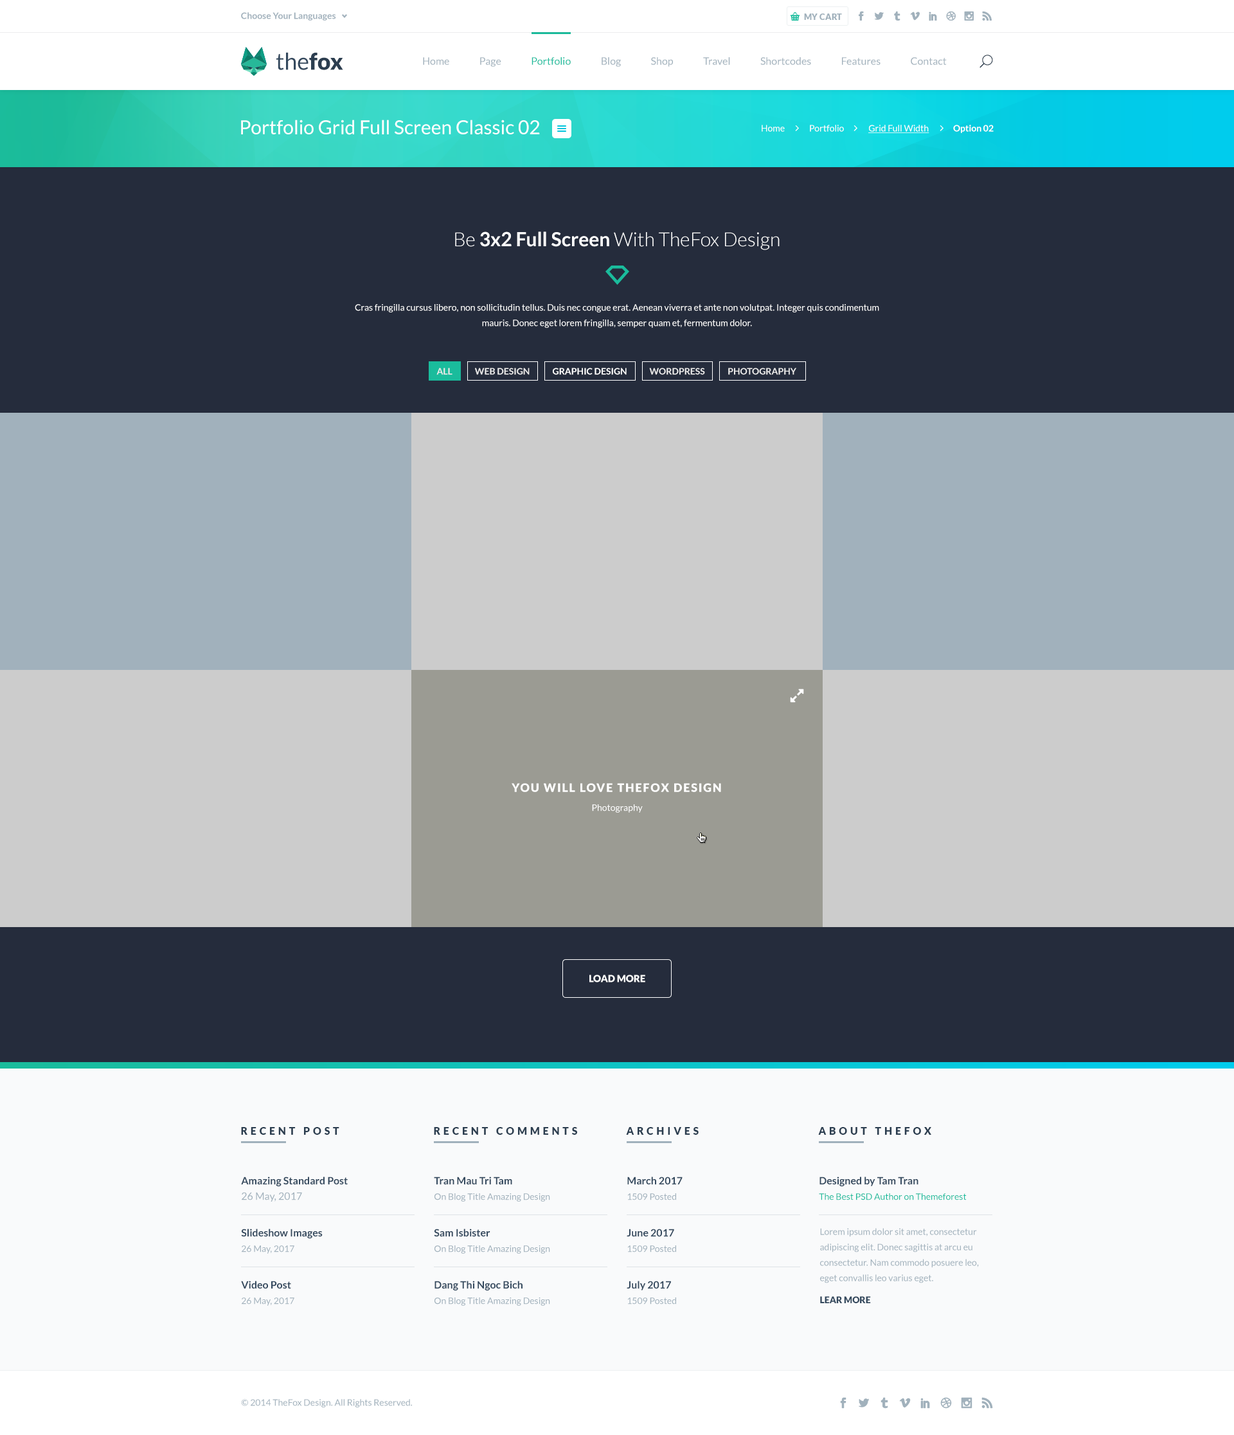
<style>
.page{position:relative;width:1234px;height:1435px;background:#252c3c}
.page>*{position:absolute;margin:0}
.t1{font:9px "Lato-Bold";color:#a1b1bc}
.t2{font:8.4px "Lato-Black";color:#a1b1bc;text-transform:uppercase}
.t3{font:23.1px "Lato-Regular";color:#34495e}
.t4{font:23.1px "Lato-Black";color:#2c3e50}
.t5{font:10.3px "Lato-Regular";color:#a1b1bc}
.t6{font:10.3px "Lato-Regular";color:#1abc9c}
.t7{font:19.3px "Lato-Regular";color:#ffffff}
.t8{font:9px "Lato-Regular";color:#ffffff}
.t9{font:9px "Lato-Regular";color:#ffffff;text-decoration:underline}
.t10{font:9px "Lato-Bold";color:#ffffff}
.t11{font:19.3px "Lato-Light";color:#ffffff}
.t12{font:19.3px "Lato-Bold";color:#ffffff}
.t13{font:9px/15.4px "Lato-Regular";color:#ffffff}
.t14{font:9px "Lato-Bold";color:#ebebeb}
.t15{font:11.6px "Lato-Black";letter-spacing:0.1em;color:#ffffff;text-transform:uppercase}
.t16{font:9.6px "Lato-Black";color:#ffffff}
.t17{font:10.3px "Lato-Black";letter-spacing:0.3em;color:#2c3e50}
.t18{font:10.3px/15.4px "Lato-Bold";color:#34495e}
.t19{font:10.3px/15.4px "Lato-Regular";color:#a1b1bc}
.t20{font:9px/15.4px "Lato-Regular";color:#a1b1bc}
.t21{font:9px/15.4px "Lato-Regular";color:#1abc9c}
.t22{font:9px "Lato-Black";color:#34495e}
.t23{font:9px "Lato-Regular";color:#a1b1bc}
</style>
<div class="page">
<p class="t1" style="left:241px;top:12px;width:95px;height:9px">Choose Your Languages</p>
<p class="t2" style="left:804px;top:14px;width:38px;height:6px">my cart</p>
<p class="t3" style="left:276px;top:52px;width:67px;height:18px">the<span class="t4">fox</span></p>
<p class="t5" style="left:423px;top:57px;width:524px;height:10px">Home               Page               <span class="t6">Portfolio</span>               Blog               Shop               Travel               Shortcodes               Features               Contact</p>
<p class="t7" style="left:241px;top:120px;width:299px;height:15px">Portfolio Grid Full Screen Classic 02</p>
<p class="t8" style="left:762px;top:125px;width:232px;height:8px">Home              Portfolio              <span class="t9">Grid Full Width              </span><span class="t10">Option 02</span></p>
<p class="t11" style="left:455px;top:231px;width:325px;height:19px">Be <span class="t12">3x2 Full Screen</span> With TheFox Design</p>
<p class="t13" style="left:355px;top:304px;width:524px;height:24px;text-align:center">Cras fringilla cursus libero, non sollicitudin tellus. Duis nec congue erat. Aenean viverra et ante non volutpat. Integer quis condimentum mauris. Donec eget lorem fringilla, semper quam et, fermentum dolor.</p>
<p class="t14" style="left:437px;top:368px;width:16px;height:7px">ALL</p>
<p class="t14" style="left:475px;top:368px;width:55px;height:7px">WEB DESIGN</p>
<p class="t10" style="left:553px;top:368px;width:74px;height:7px">GRAPHIC DESIGN</p>
<p class="t14" style="left:649px;top:368px;width:56px;height:7px">WORDPRESS</p>
<p class="t14" style="left:728px;top:368px;width:69px;height:7px">PHOTOGRAPHY</p>
<p class="t15" style="left:512px;top:783px;width:209px;height:9px">you will love thefox design</p>
<p class="t8" style="left:592px;top:804px;width:51px;height:9px">Photography</p>
<p class="t16" style="left:590px;top:975px;width:55px;height:7px">LOAD MORE</p>
<p class="t17" style="left:241px;top:1127px;width:98px;height:8px">RECENT POST</p>
<p class="t17" style="left:434px;top:1127px;width:143px;height:8px">RECENT COMMENTS</p>
<p class="t17" style="left:626px;top:1127px;width:73px;height:8px">ARCHIVES</p>
<p class="t17" style="left:818px;top:1127px;width:114px;height:8px">ABOUT THEFOX</p>
<p class="t18" style="left:241px;top:1176px;width:107px;height:26px">Amazing Standard Post<br><span class="t19">26 May, 2017</span></p>
<p class="t20" style="left:434px;top:1176px;width:116px;height:26px"><span class="t18">Tran Mau Tri Tam<br></span>On Blog Title Amazing Design</p>
<p class="t20" style="left:627px;top:1176px;width:56px;height:24px"><span class="t18">March 2017<br></span>1509 Posted</p>
<p class="t21" style="left:819px;top:1176px;width:148px;height:24px"><span class="t18">Designed by Tam Tran<br></span>The Best PSD Author on Themeforest</p>
<p class="t18" style="left:241px;top:1228px;width:82px;height:26px">Slideshow Images<br><span class="t20">26 May, 2017</span></p>
<p class="t20" style="left:434px;top:1228px;width:116px;height:26px"><span class="t18">Sam Isbister<br></span>On Blog Title Amazing Design</p>
<p class="t20" style="left:627px;top:1228px;width:49px;height:24px"><span class="t18">June 2017<br></span>1509 Posted</p>
<p class="t20" style="left:820px;top:1228px;width:159px;height:55px">Lorem ipsum dolor sit amet, consectetur adipiscing elit. Donec sagittis at arcu eu consectetur. Nam commodo posuere leo, eget convallis leo varius eget.</p>
<p class="t20" style="left:241px;top:1281px;width:53px;height:25px"><span class="t18">Video Post<br></span>26 May, 2017</p>
<p class="t20" style="left:435px;top:1281px;width:115px;height:25px"><span class="t18">Dang Thi Ngoc Bich<br></span>On Blog Title Amazing Design</p>
<p class="t20" style="left:627px;top:1281px;width:49px;height:23px"><span class="t18">July 2017<br></span>1509 Posted</p>
<p class="t22" style="left:820px;top:1296px;width:51px;height:7px">LEAR MORE</p>
<p class="t23" style="left:241px;top:1399px;width:171px;height:8px">© 2014 TheFox Design. All Rights Reserved.</p>
</div>
